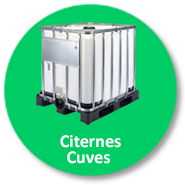
<style>
.page{position:relative;width:185px;height:185px;background:#00cc66}
.page>*{position:absolute;margin:0}
.t1{font:18px/16px "Calibri-Bold";color:#ffffff}
</style>
<div class="page">
<p class="t1" style="left:60px;top:135px;width:61px;height:29px;text-align:center">Citernes     <br> Cuves</p>
</div>
